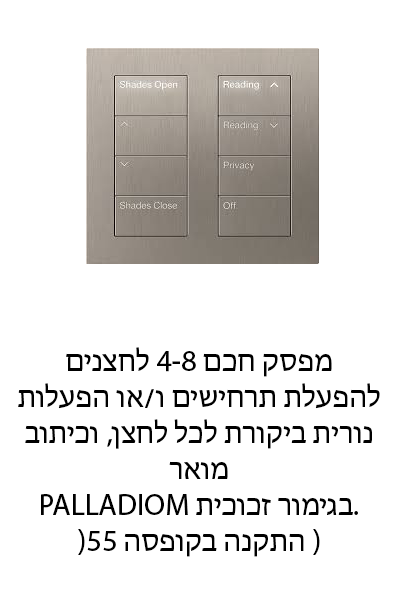
<style>
.page{position:relative;width:400px;height:600px;background:#ffffff}
.page>*{position:absolute;margin:0}
.t1{font:30px "MyriadHebrew-Regular";color:#000000}
</style>
<div class="page">
<p class="t1" style="left:18px;top:347px;width:362px;height:210px;text-align:center">מפסק חכם 4-8 לחצנים<br>להפעלת תרחישים ו/או הפעלות<br>נורית ביקורת לכל לחצן, וכיתוב<br>מואר<br>PALLADIOM בגימור זכוכית.<br>)התקנה בקופסה 55 )</p>
</div>
